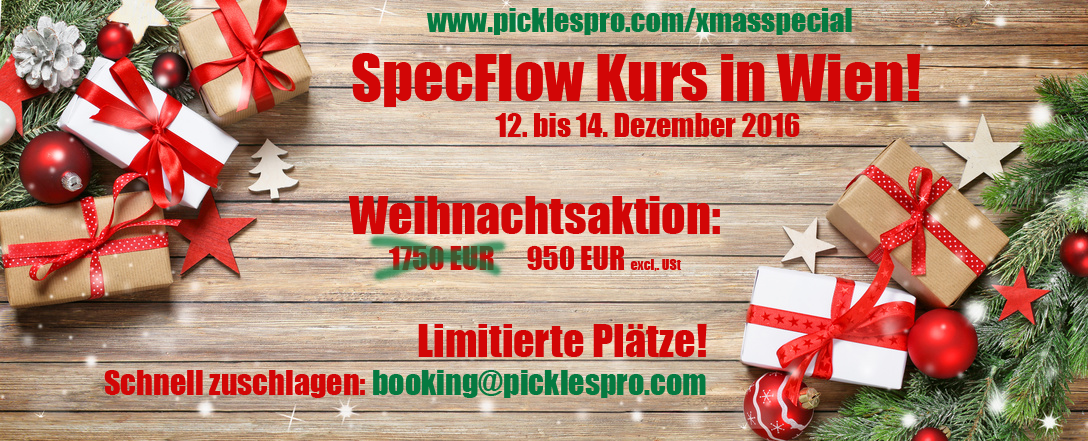
<style>
.page{position:relative;width:1088px;height:441px}
.page>*{position:absolute;margin:0}
.t1{font:30px "Impact";color:#057a41}
.t2{font:60px "Impact";color:#d20606}
.t3{font:30px "Impact";color:#d20606}
.t4{font:48px "Impact";color:#d20606}
.t5{font:14px "Impact";color:#d20606}
.t6{font:32px "Impact";color:#057a41}
.t7{font:42px "Impact";color:#d20606}
.t8{font:32px "Impact";color:#d20606}
</style>
<div class="page">
<p class="t1" style="left:427px;top:8px;width:425px;height:27px">www.picklespro.com/xmasspecial</p>
<p class="t2" style="left:352px;top:53px;width:569px;height:54px">SpecFlow Kurs in Wien!</p>
<p class="t3" style="left:495px;top:113px;width:305px;height:24px">12. bis 14. Dezember 2016</p>
<p class="t3" style="left:348px;top:196px;width:372px;height:75px;text-align:center"><span class="t4">Weihnachtsaktion:<br></span>1750 EUR      950 EUR <span class="t5">excl,. USt</span></p>
<p class="t6" style="left:104px;top:324px;width:603px;height:74px;text-align:right"><span class="t7">Limitierte Plätze!<br></span><span class="t8">Schnell zuschlagen:</span> booking@picklespro.com</p>
</div>
